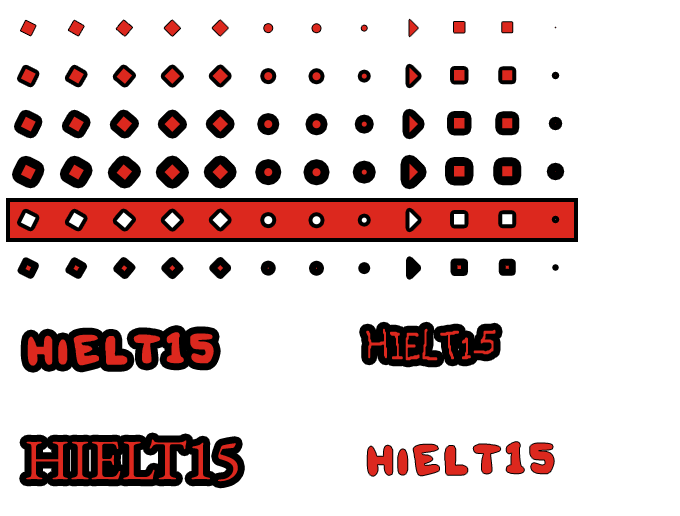
<style>
.page{position:relative;width:680px;height:516px;background:#ffffff}
.page>*{position:absolute;margin:0}
.t1{font:48px "OMORI_GAME2";color:#dc281e}
.t2{font:60px "Font_soulsV2_Body-Regular";color:#dc281e}
.t3{font:57px "EBGaramond-Regular";color:#dc281e}
</style>
<div class="page">
<p class="t1" style="left:366px;top:328px;width:130px;height:33px">HIELT15</p>
<p class="t2" style="left:27px;top:332px;width:187px;height:34px">HIELT15</p>
<p class="t3" style="left:26px;top:439px;width:212px;height:43px">HIELT15</p>
<p class="t2" style="left:367px;top:442px;width:187px;height:34px">HIELT15</p>
</div>
